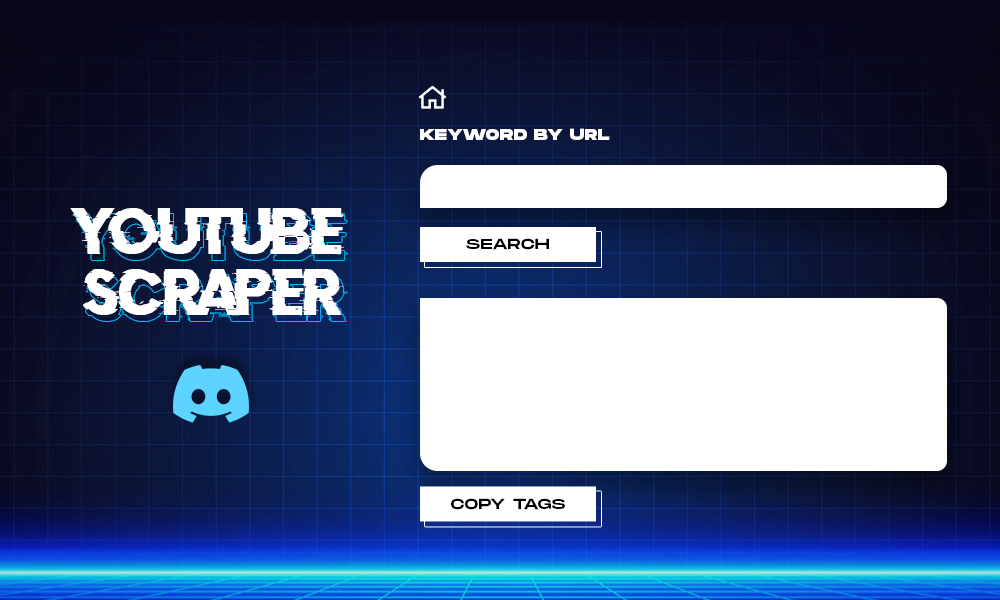
<style>
.page{position:relative;width:1000px;height:600px;background:#ffffff}
.page>*{position:absolute;margin:0}
.t1{font:15.6px "MonumentExtended-Ultrabold";letter-spacing:0.02em;color:#ffffff;text-transform:uppercase}
.t2{font:51.2px "DoctorGlitch";color:#ffffff;text-transform:uppercase}
.t3{font:14.8px "MonumentExtended-Regular";letter-spacing:0.02em;color:#000000;text-transform:uppercase}
</style>
<div class="page">
<p class="t1" style="left:420px;top:128px;width:190px;height:12px">KEYWORD BY URL</p>
<p class="t2" style="left:70px;top:208px;width:275px;height:107px;text-align:right">Youtube<br>scraper</p>
<p class="t3" style="left:466px;top:238px;width:83px;height:12px">search</p>
<p class="t3" style="left:451px;top:498px;width:114px;height:12px">copy tags</p>
</div>
